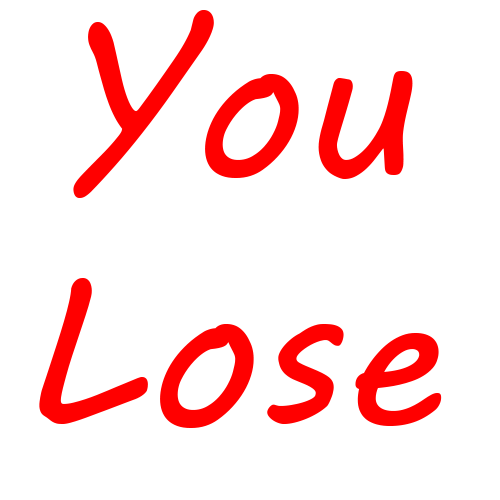
<style>
.page{position:relative;width:500px;height:500px;background:#ffffff}
.page>*{position:absolute;margin:0}
.t1{font:208.3px "MVBoli";color:#ff0000}
</style>
<div class="page">
<p class="t1" style="left:39px;top:10px;width:403px;height:418px;text-align:center">You Lose</p>
</div>
